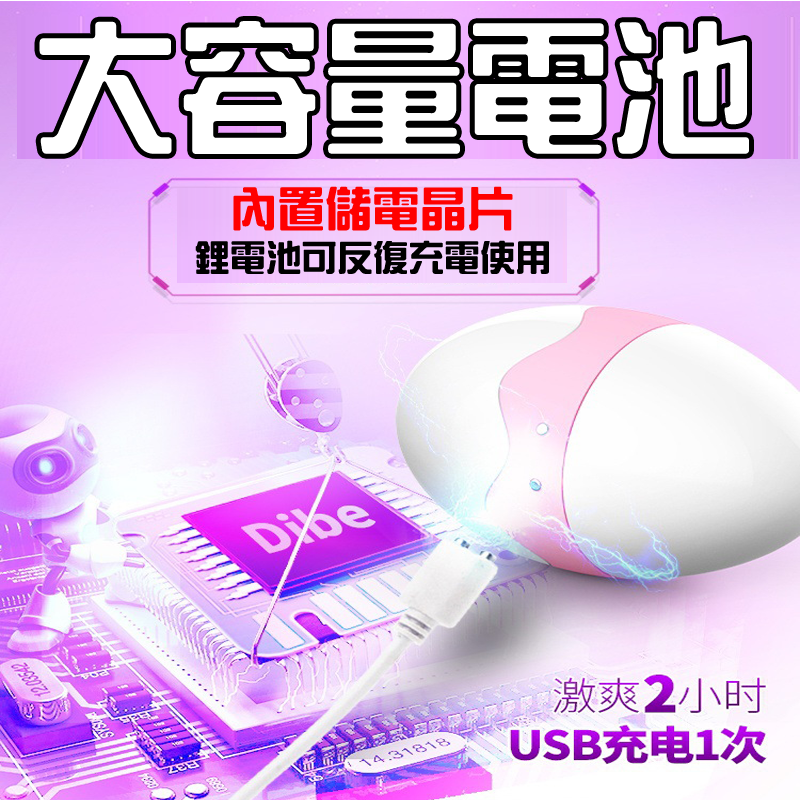
<style>
.page{position:relative;width:800px;height:800px}
.page>*{position:absolute;margin:0}
.t1{font:140.5px "HanWangZonYi";color:#ffffff;font-weight:bold}
.t2{font:46.1px "HanWangZonYi";color:#ff0000;font-weight:bold}
.t3{font:34.7px "HanWangZonYi";color:#000000;font-weight:bold}
</style>
<div class="page">
<p class="t1" style="left:39px;top:21px;width:710px;height:133px">大容量電池</p>
<p class="t2" style="left:233px;top:186px;width:280px;height:45px">內置儲電晶片</p>
<p class="t3" style="left:195px;top:240px;width:354px;height:34px">鋰電池可反復充電使用</p>
</div>
